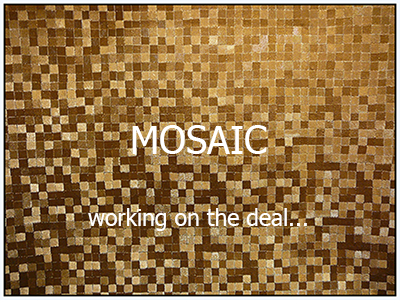
<style>
.page{position:relative;width:400px;height:300px}
.page>*{position:absolute;margin:0}
.t1{font:22.6px "Tahoma";color:#ffffff}
.t2{font:37.7px "Tahoma";color:#ffffff}
</style>
<div class="page">
<p class="t1" style="left:88px;top:125px;width:219px;height:106px;text-align:center"><span class="t2">MOSAIC<br><br></span>working on the deal...</p>
</div>
